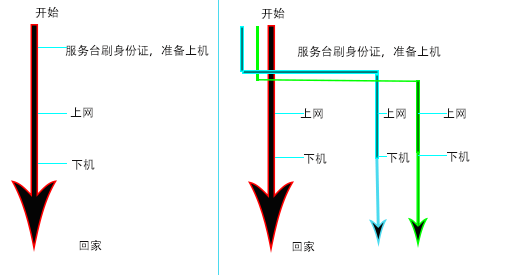
<style>
.page{position:relative;width:529px;height:275px;background:#ffffff}
.page>*{position:absolute;margin:0}
.t1{font:12px "AdobeHeitiStd-Regular";color:#141212}
</style>
<div class="page">
<p class="t1" style="left:35px;top:6px;width:24px;height:12px">开始</p>
<p class="t1" style="left:261px;top:7px;width:24px;height:12px">开始</p>
<p class="t1" style="left:65px;top:44px;width:144px;height:13px">服务台刷身份证，准备上机</p>
<p class="t1" style="left:297px;top:45px;width:144px;height:13px">服务台刷身份证，准备上机</p>
<p class="t1" style="left:70px;top:107px;width:23px;height:11px">上网</p>
<p class="t1" style="left:300px;top:108px;width:23px;height:11px">上网</p>
<p class="t1" style="left:383px;top:108px;width:23px;height:11px">上网</p>
<p class="t1" style="left:443px;top:108px;width:23px;height:11px">上网</p>
<p class="t1" style="left:72px;top:159px;width:23px;height:11px">下机</p>
<p class="t1" style="left:304px;top:153px;width:23px;height:11px">下机</p>
<p class="t1" style="left:387px;top:152px;width:23px;height:11px">下机</p>
<p class="t1" style="left:447px;top:151px;width:23px;height:11px">下机</p>
<p class="t1" style="left:79px;top:240px;width:23px;height:11px">回家</p>
<p class="t1" style="left:292px;top:241px;width:23px;height:11px">回家</p>
</div>
